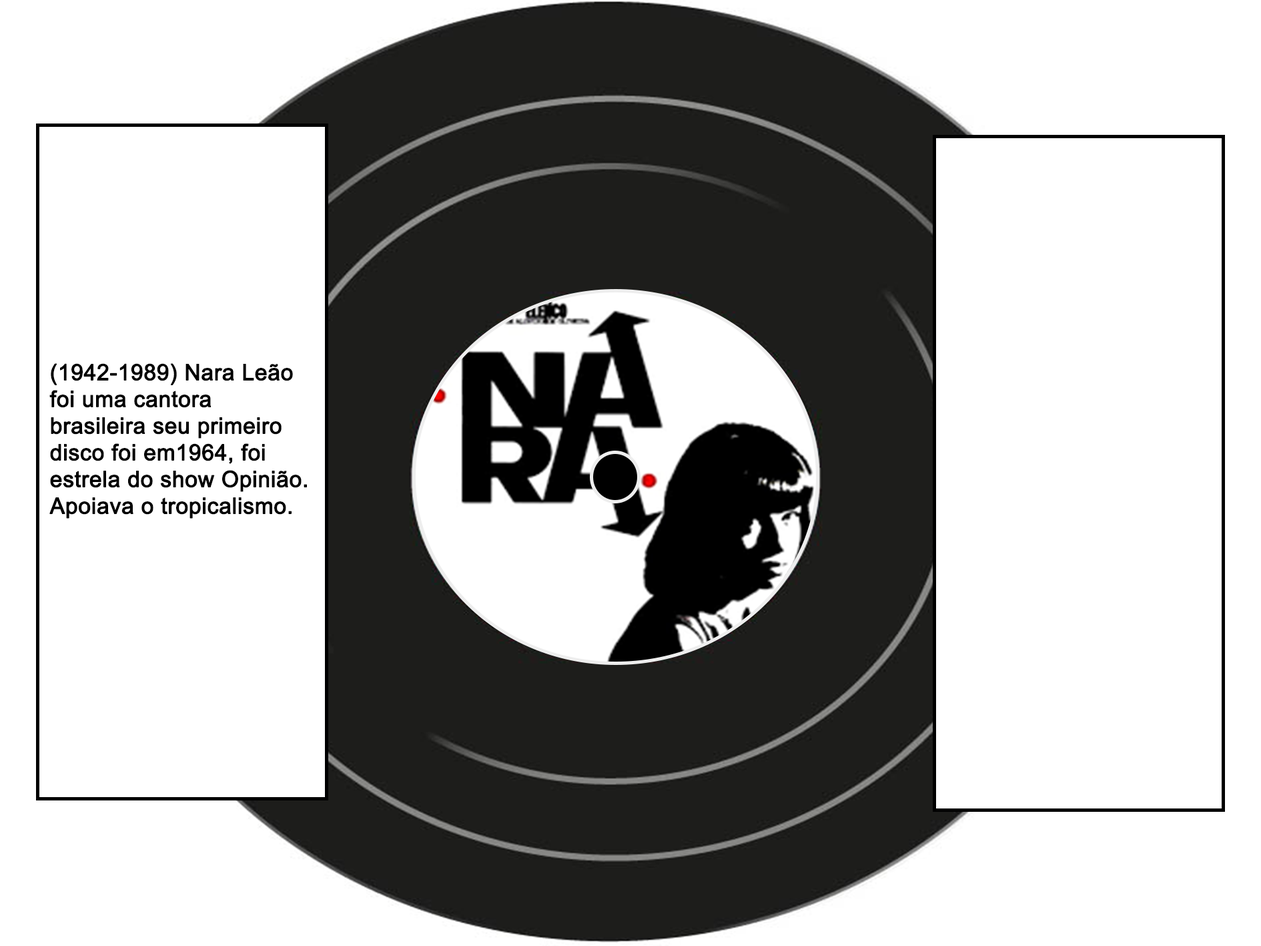
<style>
.page{position:relative;width:1261px;height:946px;background:#ffffff}
.page>*{position:absolute;margin:0}
.t1{font:22.2px "ArialMT";color:#000000;font-weight:bold}
</style>
<div class="page">
<p class="t1" style="left:49px;top:363px;width:258px;height:155px">(1942-1989) Nara Leão foi uma cantora brasileira seu primeiro disco foi em1964, foi estrela do show Opinião.  Apoiava o tropicalismo.</p>
</div>
